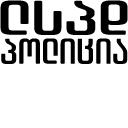
<style>
.page{position:relative;width:128px;height:128px;background:#ffffff}
.page>*{position:absolute;margin:0}
.t1{font:48.5px "ArchyEDT-Bold";color:#000000;scale:1.53 1}
.t2{font:35.8px "ArchyEDT-Bold";color:#000000;scale:1.09 1}
</style>
<div class="page">
<p class="t1" style="left:0px;top:0px;width:128px;height:35px">ლსპდ</p>
<p class="t2" style="left:1px;top:38px;width:127px;height:26px">პოლიცია</p>
</div>
